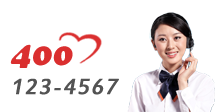
<style>
.page{position:relative;width:222px;height:112px;background:#ffffff}
.page>*{position:absolute;margin:0}
.t1{font:24px/36px "EstrangeloEdessa";letter-spacing:0.05em;color:#535353;font-weight:bold;font-style:italic}
.t2{font:32px/36px "CooperBlackStd";letter-spacing:0.02em;color:#da2f2f;font-style:italic}
</style>
<div class="page">
<p class="t1" style="left:10px;top:44px;width:109px;height:51px"><span class="t2">400<br></span>123-4567</p>
</div>
